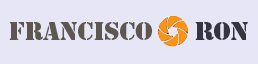
<style>
.page{position:relative;width:258px;height:64px;background:#e6e6f7}
.page>*{position:absolute;margin:0}
.t1{font:24px "StencilStd";color:#5d5750}
.t2{font:24px "StencilStd";color:#35353f}
</style>
<div class="page">
<p class="t1" style="left:9px;top:22px;width:143px;height:18px">FRANCISCO</p>
<p class="t2" style="left:195px;top:22px;width:53px;height:18px">RON</p>
</div>
